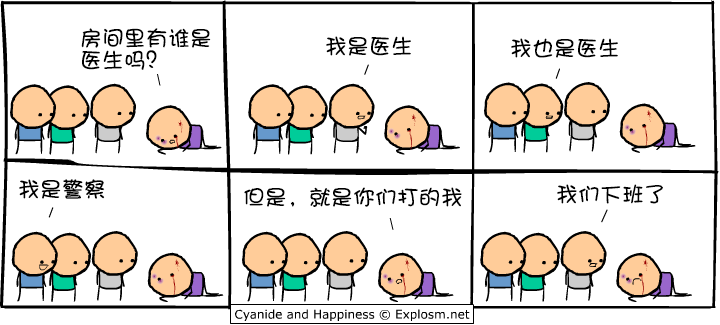
<style>
.page{position:relative;width:720px;height:325px;background:#ffffff}
.page>*{position:absolute;margin:0}
.t1{font:22px/22px "DFShaoNvW5";color:#000000}
.t2{font:22px "DFShaoNvW5";color:#000000}
</style>
<div class="page">
<p class="t1" style="left:81px;top:28px;width:130px;height:42px">房间里有谁是<br>医生吗？</p>
<p class="t2" style="left:326px;top:36px;width:85px;height:20px">我是医生</p>
<p class="t2" style="left:511px;top:38px;width:107px;height:20px">我也是医生</p>
<p class="t2" style="left:19px;top:179px;width:86px;height:20px">我是警察</p>
<p class="t2" style="left:557px;top:184px;width:106px;height:20px">我们下班了</p>
<p class="t2" style="left:244px;top:187px;width:218px;height:20px">但是，就是你们打的我</p>
</div>
